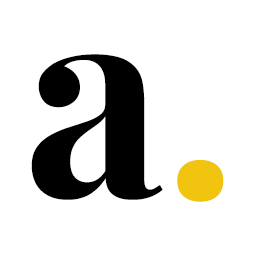
<style>
.page{position:relative;width:256px;height:256px;background:#ffffff}
.page>*{position:absolute;margin:0}
.t1{font:270px "PlayfairDisplayRoman-Bold";color:#000000}
.t2{font:270px "PlayfairDisplayRoman-Bold";color:#f1c40f}
</style>
<div class="page">
<p class="t1" style="left:31px;top:54px;width:193px;height:148px">a<span class="t2">.</span></p>
</div>
